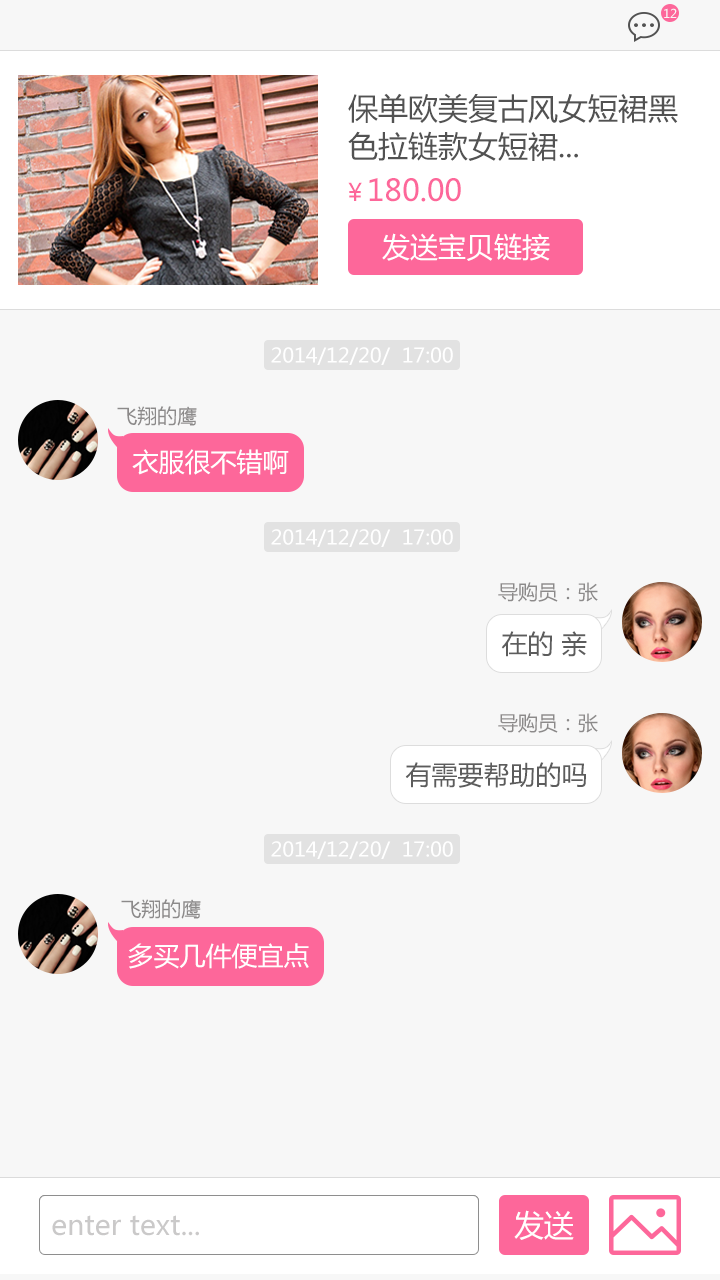
<style>
.page{position:relative;width:720px;height:1280px;background:#f7f7f7}
.page>*{position:absolute;margin:0}
.t1{font:12px "MicrosoftYaHei";color:#f7f7f7}
.t2{font:30px/38px "MicrosoftYaHei";color:#525252}
.t3{font:30px "MicrosoftYaHei";color:#fd679a}
.t4{font:24px "MicrosoftYaHei";color:#fd679a}
.t5{font:28px "MicrosoftYaHei";color:#ffffff}
.t6{font:20px "MicrosoftYaHei";color:#ffffff}
.t7{font:20px "MicrosoftYaHei";color:#8c8a8a}
.t8{font:26px "MicrosoftYaHei";color:#ffffff}
.t9{font:26px "MicrosoftYaHei";color:#5c5c5c}
.t10{font:28px "MicrosoftYaHei";color:#cac9c9}
.t11{font:30px "MicrosoftYaHei";color:#fffffe}
</style>
<div class="page">
<p class="t1" style="left:664px;top:8px;width:13px;height:10px">12</p>
<p class="t2" style="left:348px;top:93px;width:330px;height:68px">保单欧美复古风女短裙黑<br>色拉链款女短裙...</p>
<p class="t3" style="left:348px;top:178px;width:113px;height:24px"><span class="t4">￥</span>180.00</p>
<p class="t5" style="left:382px;top:233px;width:168px;height:28px">发送宝贝链接</p>
<p class="t6" style="left:271px;top:347px;width:182px;height:18px">2014/12/20/  17:00</p>
<p class="t7" style="left:117px;top:406px;width:80px;height:20px">飞翔的鹰</p>
<p class="t8" style="left:132px;top:449px;width:157px;height:26px">衣服很不错啊</p>
<p class="t6" style="left:271px;top:529px;width:182px;height:18px">2014/12/20/  17:00</p>
<p class="t7" style="left:498px;top:582px;width:100px;height:20px">导购员：张</p>
<p class="t9" style="left:501px;top:631px;width:86px;height:26px">在的 亲</p>
<p class="t7" style="left:498px;top:713px;width:100px;height:20px">导购员：张</p>
<p class="t9" style="left:405px;top:762px;width:181px;height:26px">有需要帮助的吗</p>
<p class="t6" style="left:271px;top:841px;width:182px;height:18px">2014/12/20/  17:00</p>
<p class="t7" style="left:121px;top:899px;width:80px;height:20px">飞翔的鹰</p>
<p class="t8" style="left:128px;top:943px;width:181px;height:26px">多买几件便宜点</p>
<p class="t10" style="left:52px;top:1215px;width:147px;height:21px">enter text...</p>
<p class="t11" style="left:514px;top:1210px;width:60px;height:30px">发送</p>
</div>
